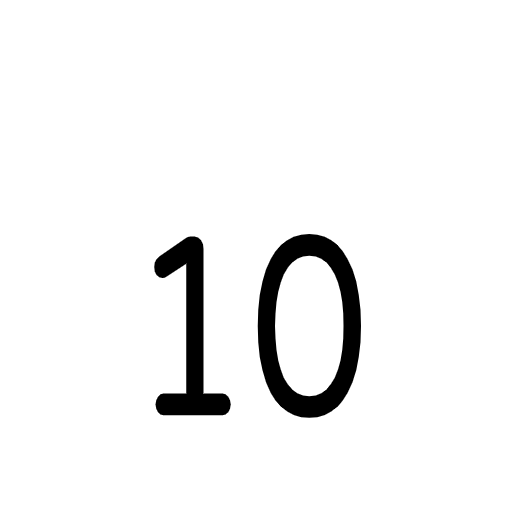
<style>
.page{position:relative;width:512px;height:512px;background:#ffffff}
.page>*{position:absolute;margin:0}
.t1{font:256px "VarelaRound-Regular";color:#000000;scale:0.74 1}
</style>
<div class="page">
<p class="t1" style="left:154px;top:234px;width:207px;height:184px">10</p>
</div>
